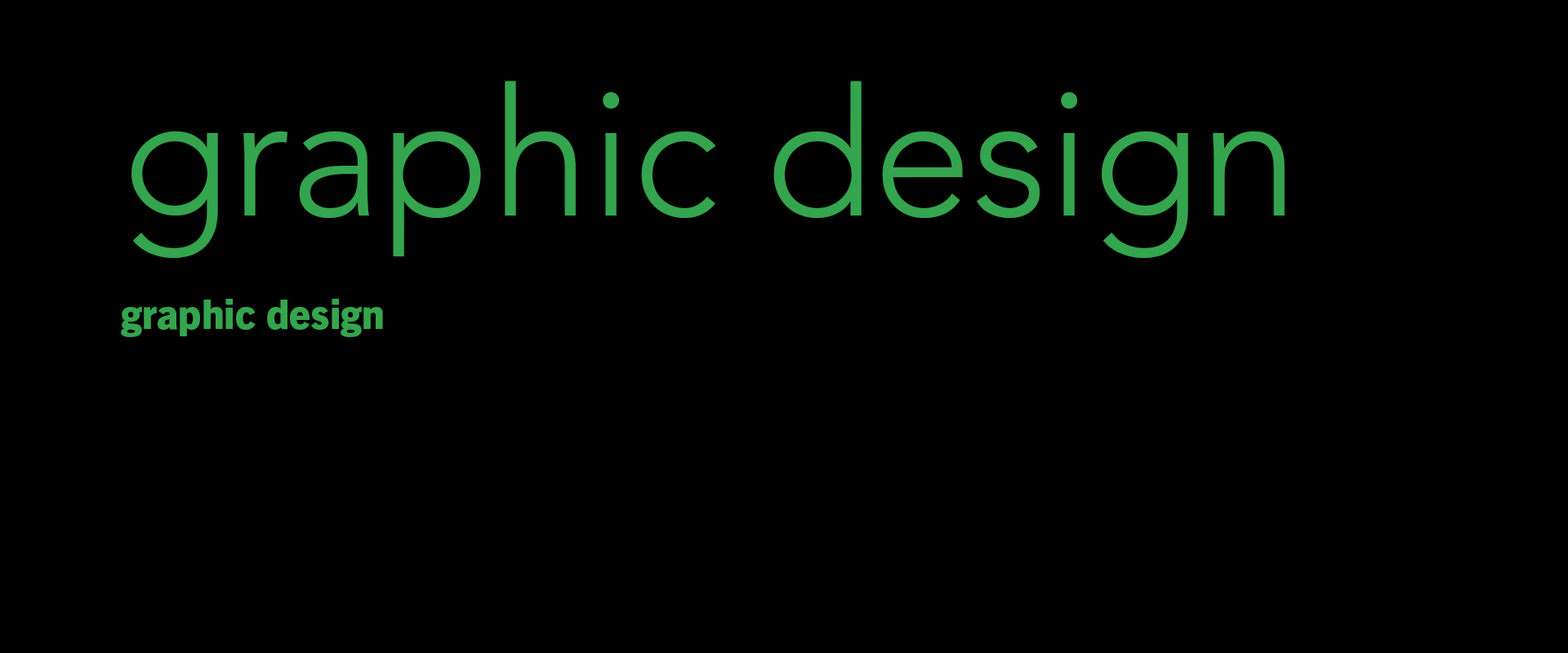
<style>
.page{position:relative;width:1568px;height:653px;background:#000000}
.page>*{position:absolute;margin:0}
.t1{font:178.1px "Avenir-Light";color:#34a54e}
.t2{font:40.8px "TradeGothicNextLTPro-Hv";color:#34a54e}
</style>
<div class="page">
<p class="t1" style="left:131px;top:81px;width:1154px;height:177px">graphic design</p>
<p class="t2" style="left:121px;top:299px;width:262px;height:38px">graphic design</p>
</div>
